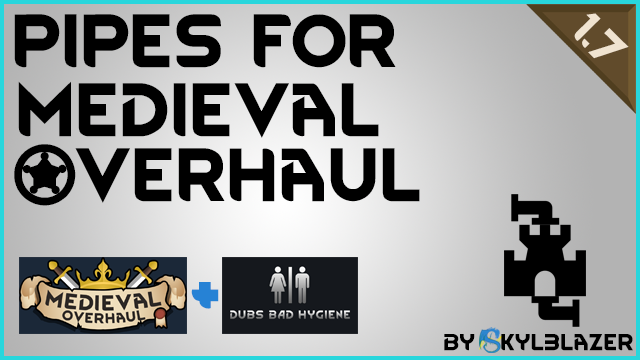
<style>
.page{position:relative;width:640px;height:360px}
.page>*{position:absolute;margin:0}
.t1{font:64px "RimWordFont";color:#000000}
.t2{font:38.9px "RimWordFont";color:#f0e3d0}
.t3{font:64px "RimWordFont";color:#2682d5}
.t4{font:19.8px "RimWordFont";color:#000000}
</style>
<div class="page">
<p class="t1" style="left:14px;top:14px;width:382px;height:54px">pipes for</p>
<p class="t2" style="left:574px;top:13px;width:55px;height:46px;rotate:45deg">1.7</p>
<p class="t1" style="left:18px;top:81px;width:361px;height:57px">Medieval</p>
<p class="t1" style="left:14px;top:144px;width:406px;height:62px">Overhaul</p>
<p class="t3" style="left:191px;top:282px;width:28px;height:27px">+</p>
<p class="t4" style="left:444px;top:334px;width:189px;height:17px">by   kyl3lazer</p>
</div>
